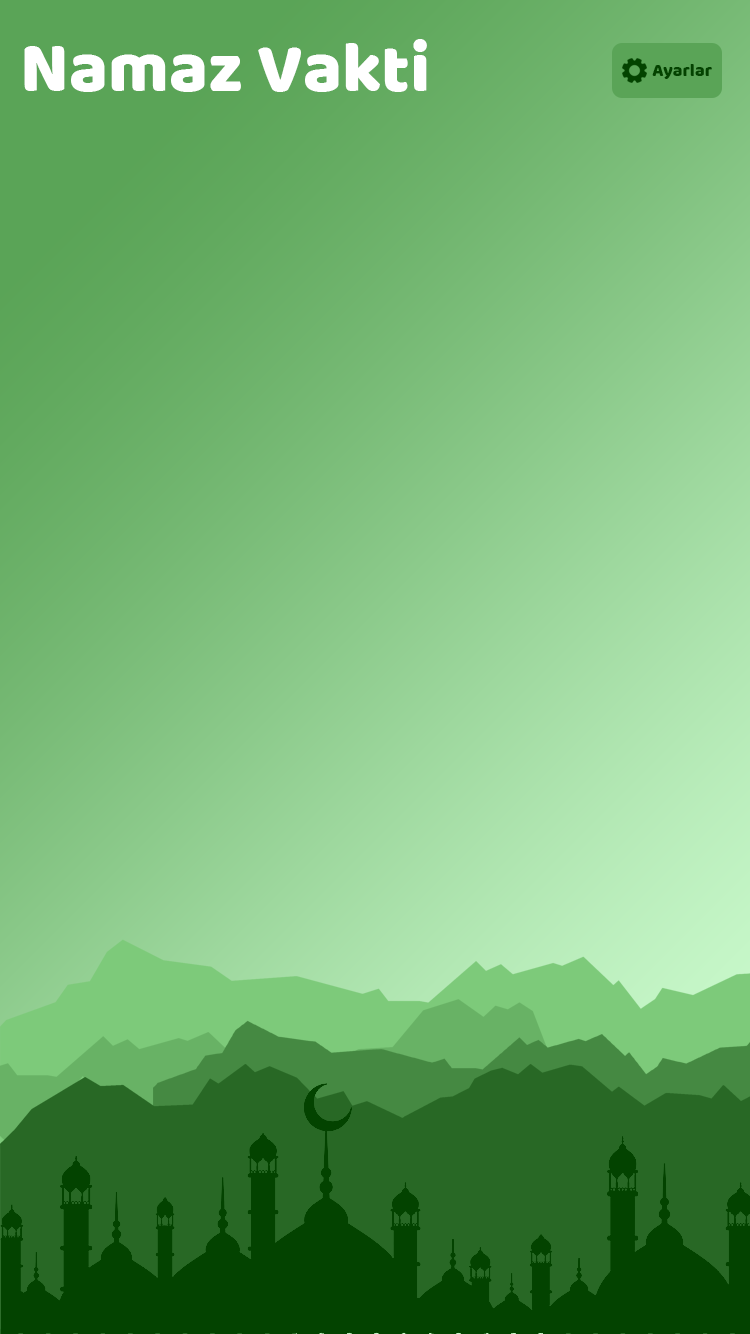
<style>
.page{position:relative;width:750px;height:1334px}
.page>*{position:absolute;margin:0}
.t1{font:72px "Baloo-Regular";color:#ffffff}
.t2{font:18px "Baloo-Regular";color:#034300}
</style>
<div class="page">
<p class="t1" style="left:24px;top:39px;width:403px;height:53px">Namaz Vakti</p>
<p class="t2" style="left:652px;top:64px;width:60px;height:15px">Ayarlar</p>
</div>
